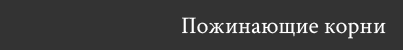
<style>
.page{position:relative;width:403px;height:50px;background:#333333}
.page>*{position:absolute;margin:0}
.t1{font:24px "CrimsonText-Regular";color:#ffffff}
</style>
<div class="page">
<p class="t1" style="left:182px;top:17px;width:204px;height:22px">Пожинающие корни</p>
</div>
